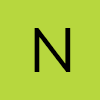
<style>
.page{position:relative;width:100px;height:100px;background:#b7d73e}
.page>*{position:absolute;margin:0}
.t1{font:62.5px "Muli-Regular";color:#000000}
</style>
<div class="page">
<p class="t1" style="left:34px;top:28px;width:37px;height:44px">N</p>
</div>
